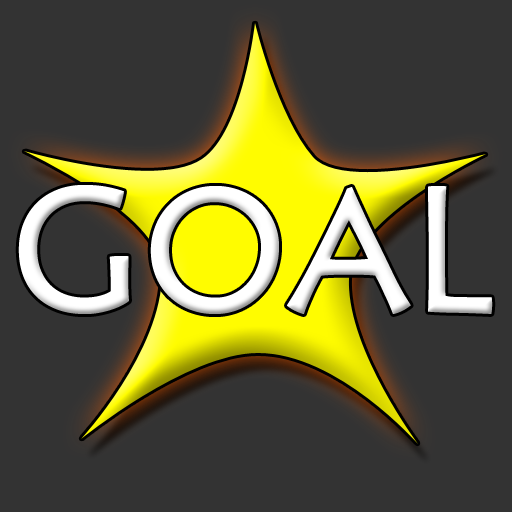
<style>
.page{position:relative;width:512px;height:512px;background:#333333}
.page>*{position:absolute;margin:0}
.t1{font:165px "Pericles";color:#ffffff}
</style>
<div class="page">
<p class="t1" style="left:18px;top:185px;width:475px;height:129px">GOAL</p>
</div>
